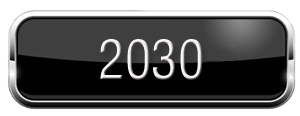
<style>
.page{position:relative;width:300px;height:116px;background:#010101}
.page>*{position:absolute;margin:0}
.t1{font:53.3px "HelveticaLTStd-Cond"}
</style>
<div class="page">
<p class="t1" style="left:100px;top:39px;width:103px;height:41px">2030</p>
</div>
